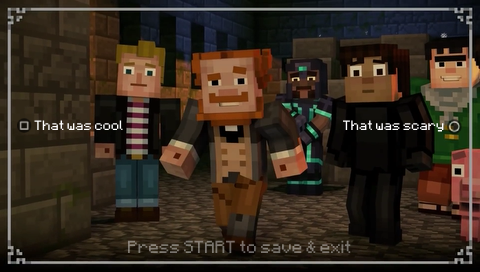
<style>
.page{position:relative;width:480px;height:272px}
.page>*{position:absolute;margin:0}
.t1{font:11px "Minecraft";color:#ffffff}
.t2{font:14px "Minecraft";color:#7d7770}
</style>
<div class="page">
<p class="t1" style="left:34px;top:120px;width:89px;height:10px">That was cool</p>
<p class="t1" style="left:343px;top:120px;width:101px;height:12px">That was scary</p>
<p class="t2" style="left:128px;top:240px;width:223px;height:13px">Press START to save &amp; exit</p>
</div>
